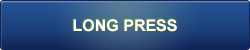
<style>
.page{position:relative;width:250px;height:50px}
.page>*{position:absolute;margin:0}
.t1{font:16px "Arial-BoldMT";color:#ffffff}
</style>
<div class="page">
<p class="t1" style="left:73px;top:19px;width:104px;height:13px">LONG PRESS</p>
</div>
